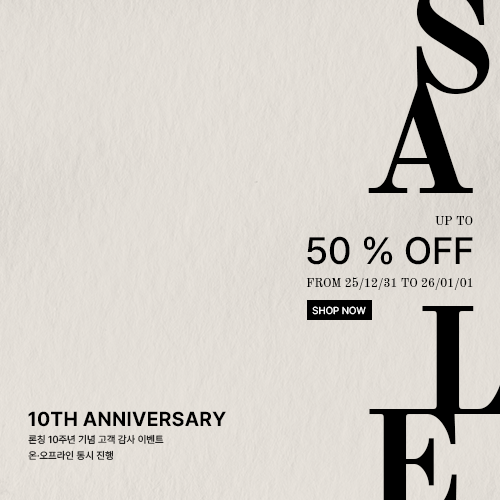
<style>
.page{position:relative;width:500px;height:500px}
.page>*{position:absolute;margin:0}
.t1{font:151.4px "OldStandardTT-Bold";letter-spacing:-0.02em;color:#000000;text-transform:uppercase}
.t2{font:12px "OldStandardTT-Regular";color:#000000;text-transform:uppercase}
.t3{font:38px "Pretendard-Medium";color:#000000}
.t4{font:10px "Pretendard-Regular";color:#ffffff;text-transform:uppercase}
.t5{font:20px "Pretendard-Bold";color:#000000;text-transform:uppercase}
.t6{font:10px "Pretendard-Regular";color:#000000;text-transform:uppercase}
.t7{font:10px "Pretendard-Regular";text-transform:uppercase}
</style>
<div class="page">
<p class="t1" style="left:368px;top:82px;width:105px;height:111px">A</p>
<p class="t2" style="left:435px;top:216px;width:38px;height:9px">up to</p>
<p class="t3" style="left:307px;top:236px;width:166px;height:29px">50 % OFF</p>
<p class="t2" style="left:306px;top:277px;width:167px;height:13px">from 25/12/31 to 26/01/01</p>
<p class="t4" style="left:312px;top:306px;width:54px;height:9px">shop now</p>
<p class="t5" style="left:28px;top:411px;width:198px;height:16px">10th anniversary</p>
<p class="t6" style="left:28px;top:434px;width:136px;height:10px">론칭 10주년 기념 고객 감사 이벤트</p>
<p class="t7" style="left:28px;top:450px;width:85px;height:10px">온·오프라인 동시 진행</p>
</div>
